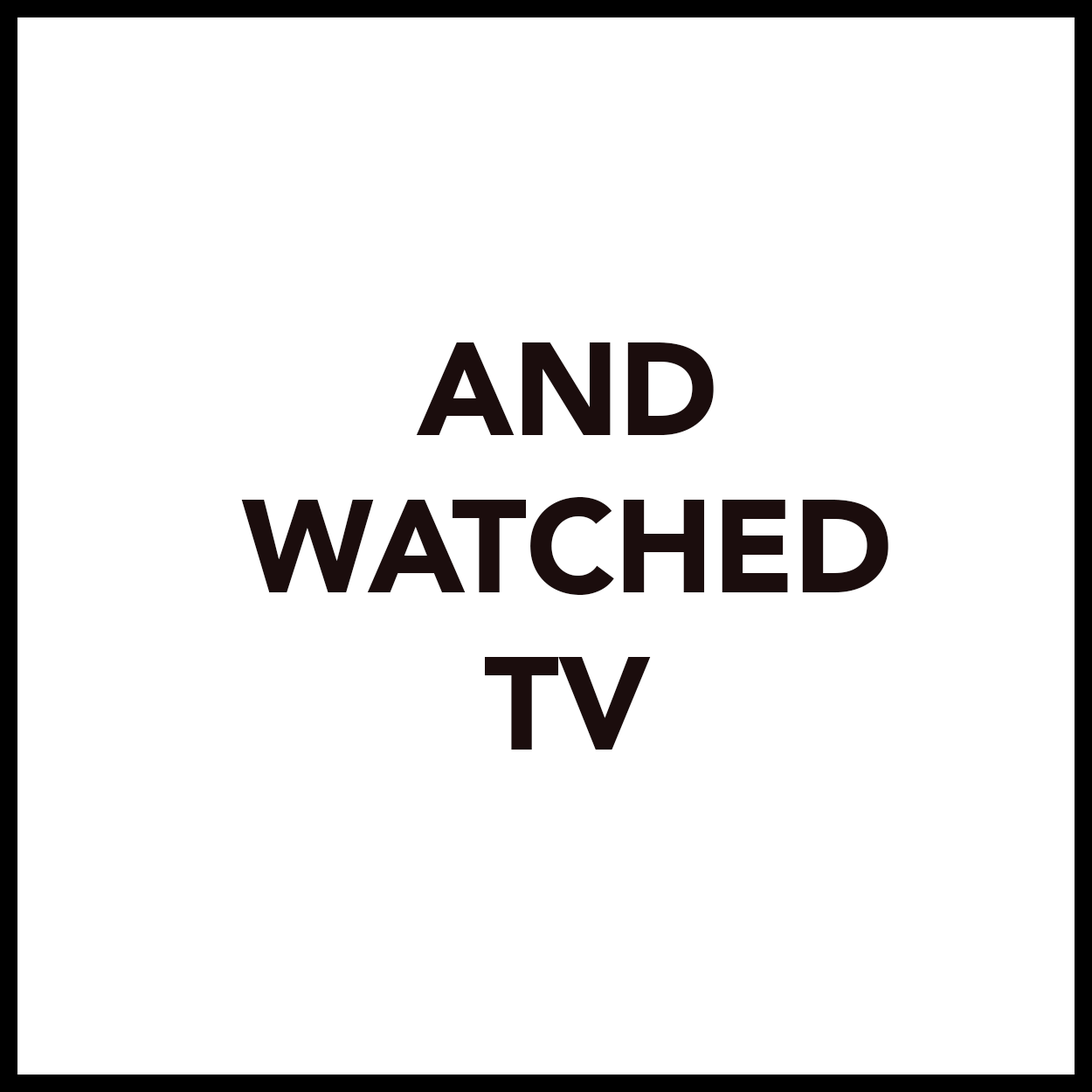
<style>
.page{position:relative;width:1092px;height:1092px;background:#ffffff}
.page>*{position:absolute;margin:0}
.t1{font:131px "Avenir-Black";letter-spacing:-0.01em;color:#1b0d0d}
</style>
<div class="page">
<p class="t1" style="left:241px;top:342px;width:647px;height:408px;text-align:center">AND<br>WATCHED<br>TV</p>
</div>
